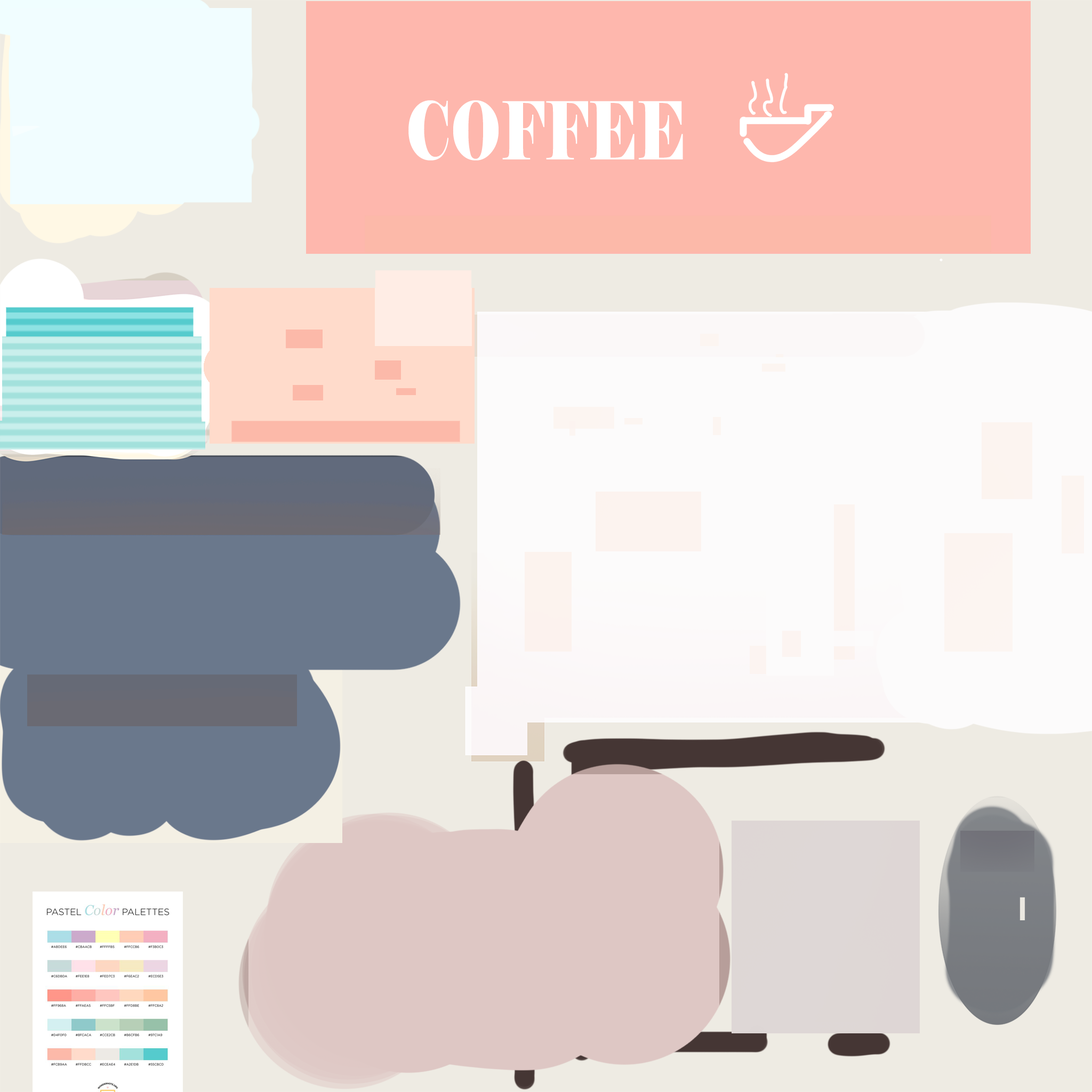
<style>
.page{position:relative;width:1092px;height:1092px}
.page>*{position:absolute;margin:0}
.t1{font:80px "Elephant-Regular";color:#ffffff;scale:0.7 1}
</style>
<div class="page">
<p class="t1" style="left:408px;top:100px;width:275px;height:60px">COFFEE</p>
</div>
